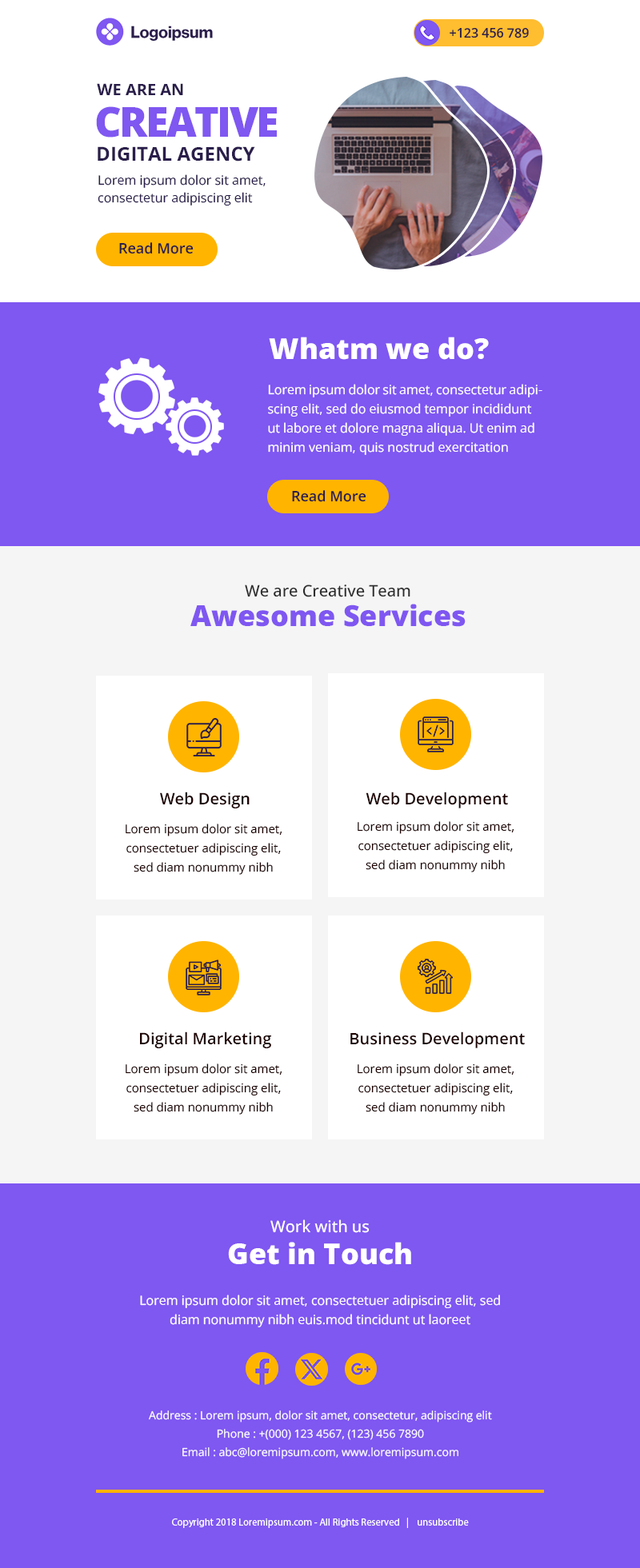
<style>
.page{position:relative;width:640px;height:1568px;background:#7f57f1}
.page>*{position:absolute;margin:0}
.t1{font:12.8px "OpenSans-SemiBold";color:#2a1e4b}
.t2{font:16px "OpenSans-Bold";color:#2a1e4b;text-transform:uppercase}
.t3{font:41.6px "OpenSans-ExtraBold";letter-spacing:-0.05em;color:#7f57f1;text-transform:uppercase}
.t4{font:19.2px "OpenSans-Bold";color:#2a1e4b;text-transform:uppercase}
.t5{font:12.8px/17.6px "OpenSans-Regular";color:#2a1e4b}
.t6{font:14.4px "OpenSans-SemiBold";color:#2a1e4b}
.t7{font:28.8px "OpenSans-ExtraBold";color:#ffffff}
.t8{font:12.8px/19.2px "OpenSans-Regular";color:#ffffff}
.t9{font:16px "OpenSans-Medium";color:#2c2c2c}
.t10{font:28.8px "OpenSans-ExtraBold";color:#7f57f1}
.t11{font:16px "OpenSans-SemiBold";color:#1d0101}
.t12{font:12px/19.2px "OpenSans-Regular";color:#1d0101}
.t13{font:16px "OpenSans-Medium";color:#ffffff}
.t14{font:11.2px/18.2px "OpenSans-Regular";color:#ffffff}
.t15{font:10.1px "MyriadPro-Regular";color:#ffffff}
</style>
<div class="page">
<p class="t1" style="left:449px;top:28px;width:80px;height:10px">+123 456 789</p>
<p class="t2" style="left:97px;top:83px;width:86px;height:12px">We are an</p>
<p class="t3" style="left:96px;top:106px;width:181px;height:32px">Creative</p>
<p class="t4" style="left:98px;top:146px;width:157px;height:16px">Digital Agency</p>
<p class="t5" style="left:98px;top:174px;width:167px;height:31px">Lorem ipsum dolor sit amet, <br>consectetur adipiscing elit</p>
<p class="t6" style="left:119px;top:242px;width:75px;height:12px">Read More</p>
<p class="t7" style="left:269px;top:337px;width:220px;height:23px">Whatm we do?</p>
<p class="t8" style="left:268px;top:384px;width:274px;height:71px">Lorem ipsum dolor sit amet, consectetur adipiscing elit, sed do eiusmod tempor incididunt ut labore et dolore magna aliqua. Ut enim ad minim veniam, quis nostrud exercitation ullamco laboris</p>
<p class="t6" style="left:292px;top:490px;width:74px;height:12px">Read More</p>
<p class="t9" style="left:245px;top:585px;width:165px;height:12px">We are Creative Team</p>
<p class="t10" style="left:190px;top:604px;width:275px;height:23px">Awesome Services</p>
<p class="t11" style="left:160px;top:792px;width:89px;height:16px">Web Design</p>
<p class="t11" style="left:365px;top:792px;width:143px;height:16px">Web Development</p>
<p class="t12" style="left:357px;top:821px;width:157px;height:51px;text-align:center">Lorem ipsum dolor sit amet, consectetuer adipiscing elit, sed diam nonummy nibh euis.mod tincidunt ut laoreet</p>
<p class="t12" style="left:126px;top:824px;width:156px;height:51px;text-align:center">Lorem ipsum dolor sit amet, consectetuer adipiscing elit, sed diam nonummy nibh euis.mod tincidunt ut laoreet</p>
<p class="t11" style="left:140px;top:1031px;width:131px;height:17px">Digital Marketing</p>
<p class="t11" style="left:350px;top:1031px;width:175px;height:17px">Business Development</p>
<p class="t12" style="left:126px;top:1063px;width:156px;height:52px;text-align:center">Lorem ipsum dolor sit amet, consectetuer adipiscing elit, sed diam nonummy nibh euis.mod tincidunt ut laoreet</p>
<p class="t12" style="left:357px;top:1063px;width:157px;height:52px;text-align:center">Lorem ipsum dolor sit amet, consectetuer adipiscing elit, sed diam nonummy nibh euis.mod tincidunt ut laoreet</p>
<p class="t13" style="left:270px;top:1219px;width:99px;height:14px">Work with us</p>
<p class="t7" style="left:228px;top:1242px;width:183px;height:23px">Get in Touch</p>
<p class="t8" style="left:140px;top:1295px;width:360px;height:32px;text-align:center">Lorem ipsum dolor sit amet, consectetuer adipiscing elit, sed diam nonummy nibh euis.mod tincidunt ut laoreet</p>
<p class="t14" style="left:149px;top:1410px;width:343px;height:49px;text-align:center">Address : Lorem ipsum, dolor sit amet, consectetur, adipiscing elit<br>Phone : +(000) 123 4567, (123) 456 7890<br>Email : abc@loremipsum.com, www.loremipsum.com</p>
<p class="t15" style="left:172px;top:1518px;width:297px;height:10px">Copyright 2018 Loremipsum.com - All Rights Reserved   |    unsubscribe</p>
</div>
